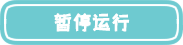
<style>
.page{position:relative;width:183px;height:45px;background:#6ecad0}
.page>*{position:absolute;margin:0}
.t1{font:12px "shetumodengxiaofangti";color:#ffffff;font-weight:bold;scale:0.94 1}
</style>
<div class="page">
<p class="t1" style="left:54px;top:13px;width:76px;height:19px">暂停运行</p>
</div>
